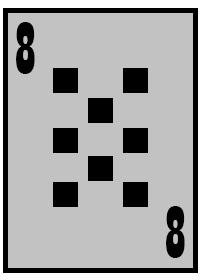
<style>
.page{position:relative;width:200px;height:280px;background:#c2c2c2}
.page>*{position:absolute;margin:0}
.t1{font:75px "Playbill";color:#000000}
</style>
<div class="page">
<p class="t1" style="left:16px;top:22px;width:19px;height:52px">8</p>
<p class="t1" style="left:166px;top:206px;width:19px;height:52px">8</p>
</div>
